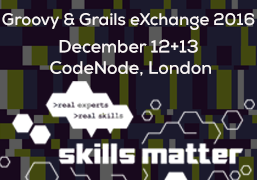
<style>
.page{position:relative;width:257px;height:180px}
.page>*{position:absolute;margin:0}
.t1{font:16.7px "Nexa-Bold";color:#f9f5f5}
.t2{font:17.7px "Nexa-Bold";color:#f9f5f5}
</style>
<div class="page">
<p class="t1" style="left:2px;top:13px;width:253px;height:17px">Groovy &amp; Grails eXchange 2016</p>
<p class="t2" style="left:50px;top:39px;width:161px;height:37px;text-align:center">December 12+13 <br>CodeNode, London</p>
</div>
